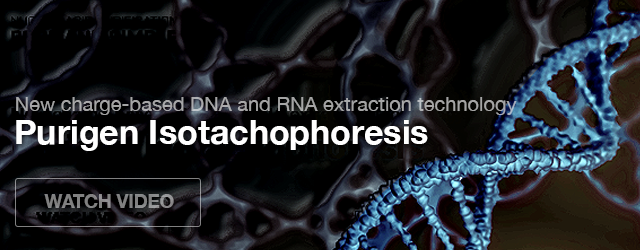
<style>
.page{position:relative;width:640px;height:250px;background:#000000}
.page>*{position:absolute;margin:0}
.t1{font:20px "HelveticaNeue";color:#a5a5a5}
.t2{font:34px "HelveticaNeue-Bold";color:#ffffff}
.t3{font:18.8px "HelveticaNeue-Bold";letter-spacing:-0.01em;color:#7c868c;text-transform:uppercase}
</style>
<div class="page">
<p class="t1" style="left:16px;top:97px;width:501px;height:18px">New charge-based DNA and RNA extraction technology</p>
<p class="t2" style="left:16px;top:120px;width:412px;height:31px">Purigen Isotachophoresis</p>
<p class="t3" style="left:44px;top:194px;width:130px;height:14px">Watch Video</p>
</div>
